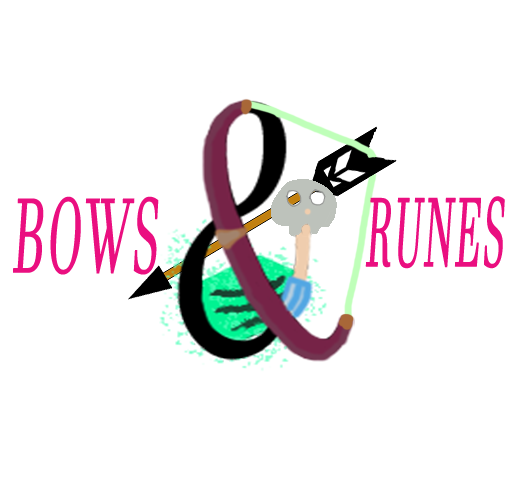
<style>
.page{position:relative;width:512px;height:499px;background:#ffffff}
.page>*{position:absolute;margin:0}
.t1{font:103.8px "JavaneseText";letter-spacing:0.04em;color:#ea0f80;text-transform:uppercase;font-weight:bold;font-style:italic;scale:0.44 1}
.t2{font:95.8px "JavaneseText";letter-spacing:0.04em;color:#ea0f80;text-transform:uppercase;font-weight:bold;font-style:italic;scale:0.39 1}
</style>
<div class="page">
<p class="t1" style="left:13px;top:196px;width:146px;height:79px">BOWS</p>
<p class="t2" style="left:365px;top:196px;width:140px;height:73px">RUNES</p>
</div>
